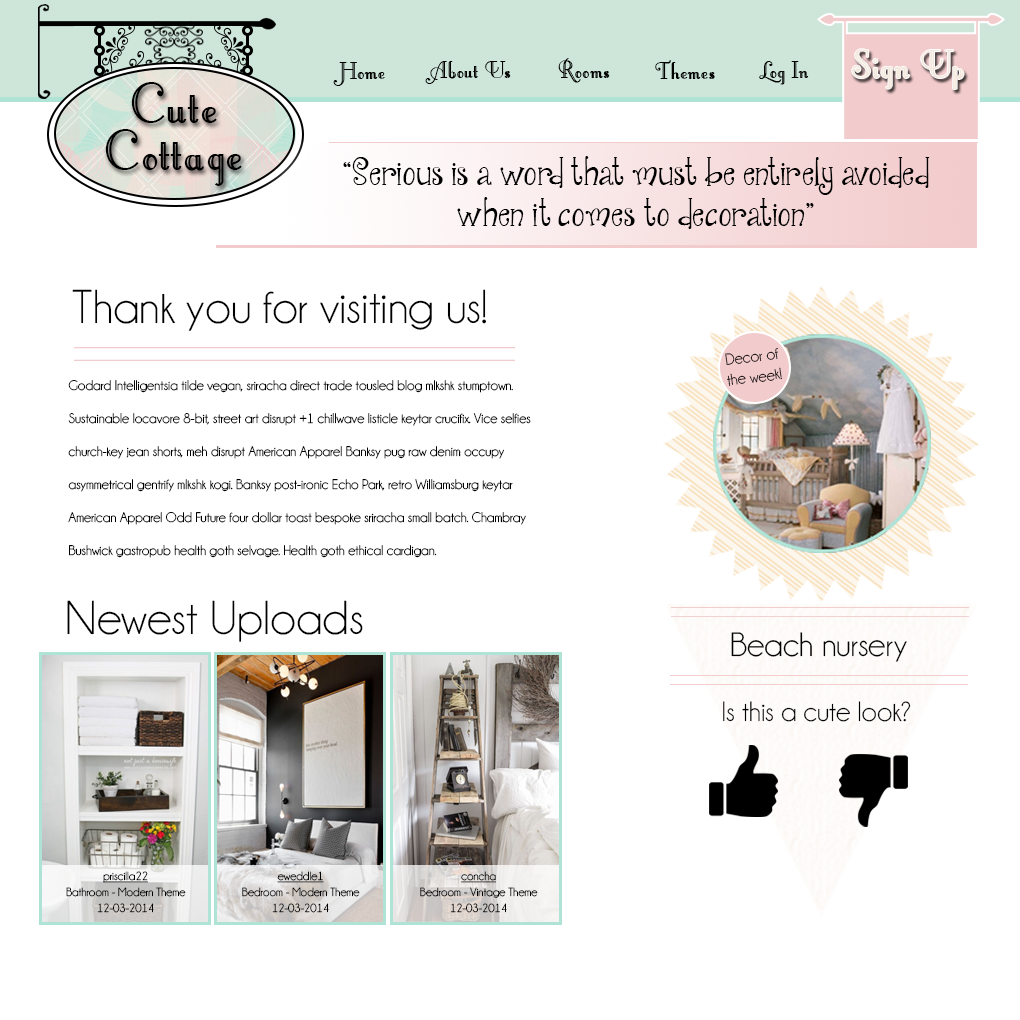
<style>
.page{position:relative;width:1020px;height:1020px;background:#ffffff}
.page>*{position:absolute;margin:0}
.t1{font:48px "LittleLordFontleroyNF";color:#f3e7db}
.t2{font:30px "LittleLordFontleroyNF";color:#000000}
.t3{font:70.8px/23.6px "LittleLordFontleroyNF";color:#000000}
.t4{font:36px/41px "JandaQuirkygirl";color:#000000}
.t5{font:48px "Champagne&Limousines";color:#000000}
.t6{font:16.2px "Champagne&Limousines"}
.t7{font:14px/33px "Champagne&Limousines";color:#000000}
.t8{font:34px "Champagne&Limousines";color:#000000}
.t9{font:28.3px "Champagne&Limousines";color:#000000}
.t10{font:12px/16px "Champagne&Limousines";color:#000000}
.t11{font:12px/16px "Champagne&Limousines";color:#000000;text-decoration:underline}
</style>
<div class="page">
<p class="t1" style="left:852px;top:49px;width:112px;height:40px">Sign Up</p>
<p class="t2" style="left:333px;top:62px;width:52px;height:24px">Home</p>
<p class="t2" style="left:425px;top:61px;width:86px;height:23px">About Us</p>
<p class="t2" style="left:558px;top:58px;width:52px;height:25px">Rooms</p>
<p class="t2" style="left:655px;top:60px;width:60px;height:19px">Themes</p>
<p class="t2" style="left:759px;top:61px;width:50px;height:24px">Log In</p>
<p class="t3" style="left:105px;top:82px;width:137px;height:104px;text-align:center">Cute <br><br>Cottage</p>
<p class="t4" style="left:343px;top:156px;width:587px;height:73px;text-align:center">“Serious is a word that must be entirely avoided <br>when it comes to decoration”</p>
<p class="t5" style="left:72px;top:289px;width:415px;height:42px">Thank you for visiting us!</p>
<p class="t6" style="left:725px;top:348px;width:57px;height:38px;rotate:-8deg">Decor of the week!</p>
<p class="t7" style="left:68px;top:380px;width:463px;height:178px">Godard Intelligentsia tilde vegan, sriracha direct trade tousled blog mlkshk stumptown. Sustainable locavore 8-bit, street art disrupt +1 chillwave listicle keytar crucifix. Vice selfies church-key jean shorts, meh disrupt American Apparel Banksy pug raw denim occupy asymmetrical gentrify mlkshk kogi. Banksy post-ironic Echo Park, retro Williamsburg keytar American Apparel Odd Future four dollar toast bespoke sriracha small batch. Chambray Bushwick gastropub health goth selvage. Health goth ethical cardigan.</p>
<p class="t5" style="left:67px;top:600px;width:296px;height:42px">Newest Uploads</p>
<p class="t8" style="left:731px;top:632px;width:176px;height:30px">Beach nursery</p>
<p class="t9" style="left:723px;top:701px;width:188px;height:21px">Is this a cute look?</p>
<p class="t10" style="left:66px;top:871px;width:120px;height:42px;text-align:center"><span class="t11">priscilla22<br></span>Bathroom - Modern Theme<br>12-03-2014</p>
<p class="t10" style="left:242px;top:871px;width:118px;height:42px;text-align:center"><span class="t11">eweddle1<br></span>Bedroom - Modern Theme<br>12-03-2014</p>
<p class="t10" style="left:420px;top:871px;width:118px;height:42px;text-align:center"><span class="t11">concha<br></span>Bedroom - Vintage Theme<br>12-03-2014</p>
</div>
